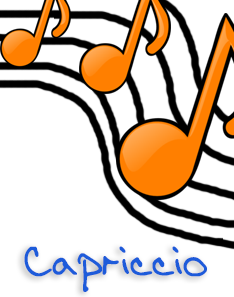
<style>
.page{position:relative;width:234px;height:297px;background:#ffffff}
.page>*{position:absolute;margin:0}
.t1{font:47.1px "AEnigmaScrawl4BRK";color:#1d5bda}
</style>
<div class="page">
<p class="t1" style="left:24px;top:246px;width:183px;height:46px">Capriccio</p>
</div>
